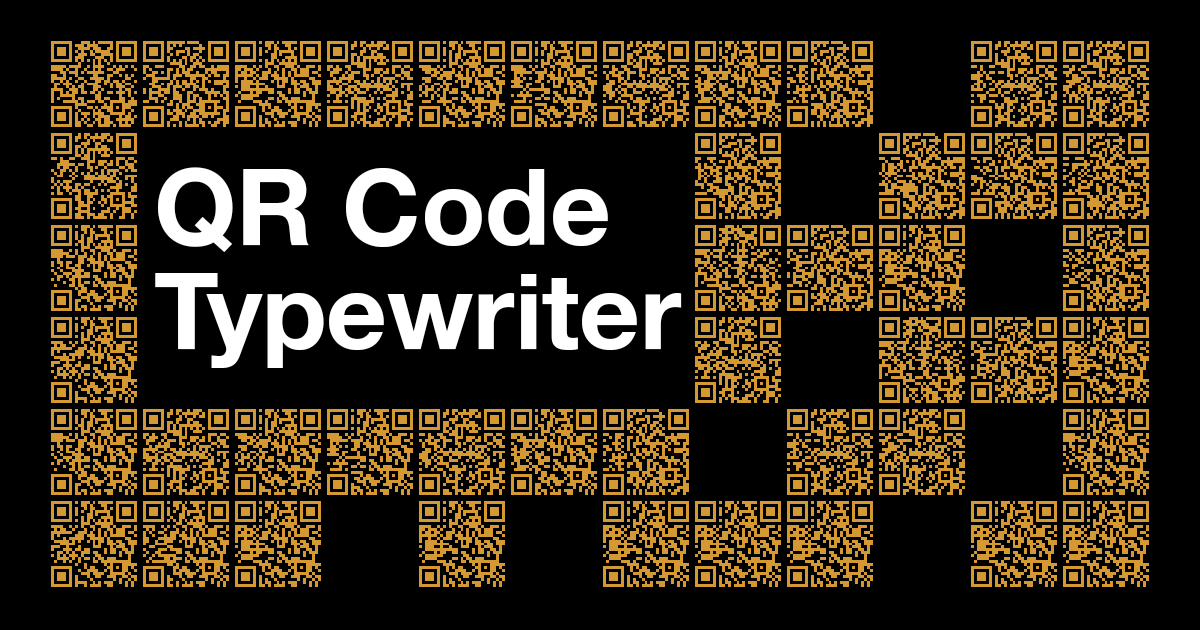
<style>
.page{position:relative;width:1200px;height:630px;background:#000000}
.page>*{position:absolute;margin:0}
.t1{font:105.9px/104px "HelveticaNeue-Bold";color:#ffffff}
</style>
<div class="page">
<p class="t1" style="left:155px;top:167px;width:527px;height:201px">QR Code<br>Typewriter</p>
</div>
